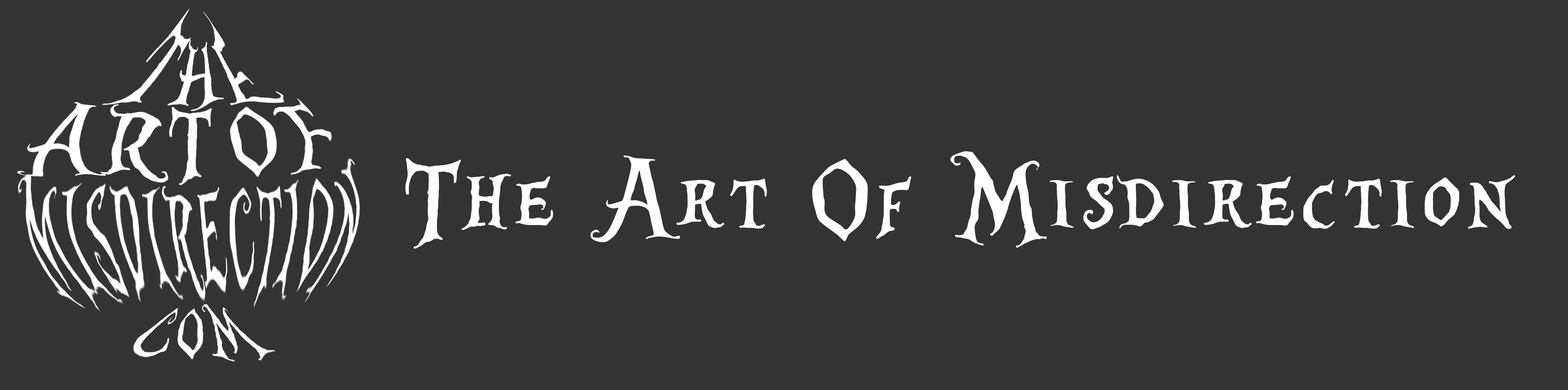
<style>
.page{position:relative;width:1568px;height:390px;background:#333333}
.page>*{position:absolute;margin:0}
.t1{font:121.9px "AliceinWonderland";letter-spacing:0.05em;color:#ffffff}
</style>
<div class="page">
<p class="t1" style="left:405px;top:151px;width:1110px;height:98px">The Art Of Misdirection</p>
</div>
